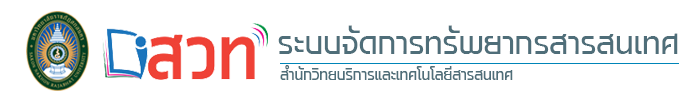
<style>
.page{position:relative;width:700px;height:100px;background:#ffffff}
.page>*{position:absolute;margin:0}
.t1{font:30px "FlatorySans-400";color:#4f6e79}
.t2{font:14px "FlatorySans-400";color:#4f6e79}
</style>
<div class="page">
<p class="t1" style="left:278px;top:25px;width:400px;height:29px">ระบบจัดการทรัพยากรสารสนเทศ</p>
<p class="t2" style="left:280px;top:65px;width:233px;height:15px">สำนักวิทยบริการและเทคโนโลยีสารสนเทศ</p>
</div>
